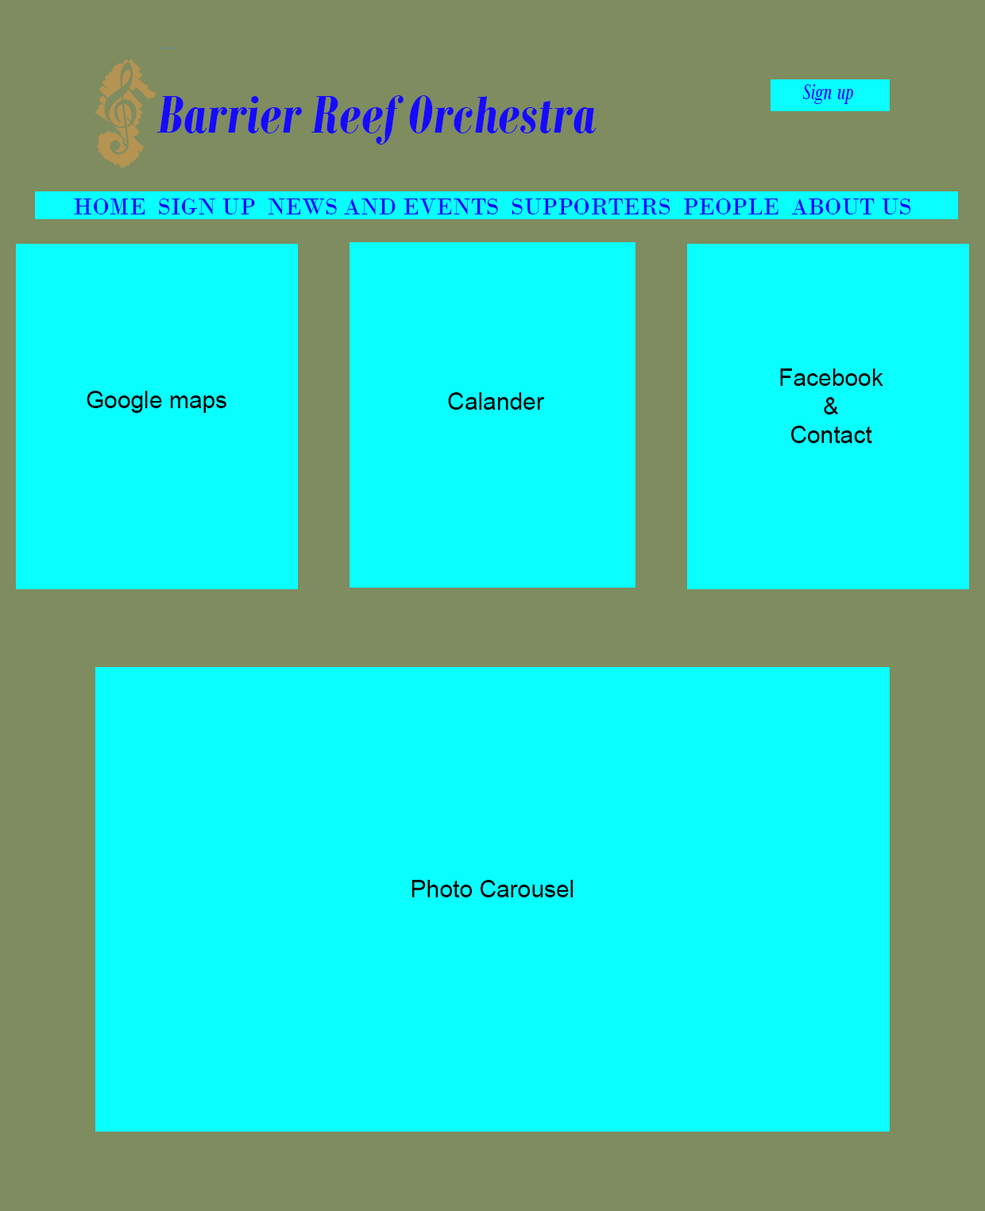
<style>
.page{position:relative;width:985px;height:1211px;background:#09ffff}
.page>*{position:absolute;margin:0}
.t1{font:23.8px "BodoniMTCondensed-Italic";color:#1609ff}
.t2{font:57.2px "BodoniMTCondensed-BoldItalic";color:#1609ff}
.t3{font:23.8px "BodoniMT";color:#1609ff}
.t4{font:23.8px "ArialMT";color:#000000}
</style>
<div class="page">
<p class="t1" style="left:802px;top:84px;width:51px;height:20px">Sign up</p>
<p class="t2" style="left:156px;top:95px;width:440px;height:50px">Barrier Reef Orchestra</p>
<p class="t3" style="left:74px;top:199px;width:837px;height:15px">HOME  SIGN UP  NEWS AND EVENTS  SUPPORTERS  PEOPLE  ABOUT US</p>
<p class="t4" style="left:780px;top:368px;width:103px;height:75px;text-align:center">Facebook<br>&amp;<br>Contact</p>
<p class="t4" style="left:87px;top:391px;width:139px;height:22px">Google maps</p>
<p class="t4" style="left:448px;top:392px;width:97px;height:18px">Calander</p>
<p class="t4" style="left:411px;top:880px;width:162px;height:17px">Photo Carousel</p>
</div>
